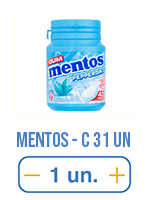
<style>
.page{position:relative;width:149px;height:200px;background:#ffffff}
.page>*{position:absolute;margin:0}
.t1{font:21.3px "BebasNeue-Regular";color:#4981c2}
</style>
<div class="page">
<p class="t1" style="left:17px;top:132px;width:113px;height:15px">mentos - c 31 un</p>
</div>
